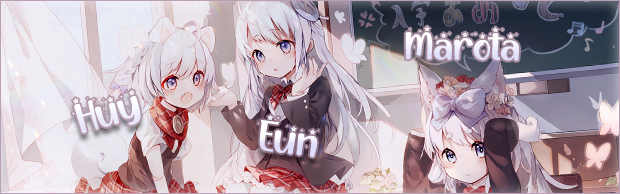
<style>
.page{position:relative;width:620px;height:194px}
.page>*{position:absolute;margin:0}
.t1{font:42.6px "SelamatPestaNatalRegular";color:#efeffd}
.t2{font:46.7px "SelamatPestaNatalRegular";color:#f3f3fd}
.t3{font:47.3px "SelamatPestaNatalRegular";color:#efeefc}
</style>
<div class="page">
<p class="t1" style="left:405px;top:26px;width:114px;height:35px;rotate:1deg">Marota</p>
<p class="t2" style="left:72px;top:89px;width:69px;height:44px;rotate:-16deg">Huy</p>
<p class="t3" style="left:257px;top:114px;width:62px;height:44px;rotate:8deg">Eun</p>
</div>
